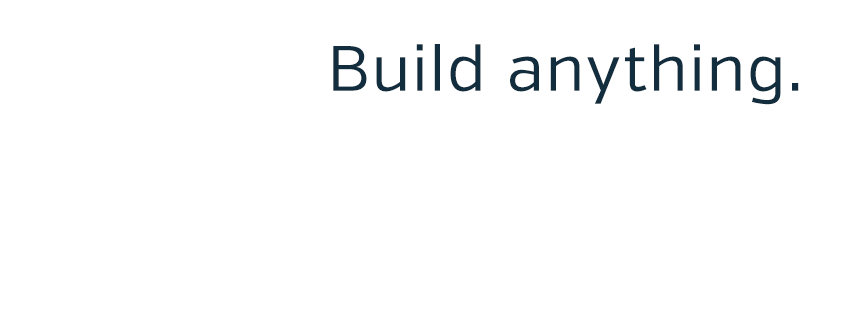
<style>
.page{position:relative;width:851px;height:315px;background:#ffffff}
.page>*{position:absolute;margin:0}
.t1{font:64px "VerbRegular";letter-spacing:0.025em;color:#122d3e}
</style>
<div class="page">
<p class="t1" style="left:333px;top:44px;width:466px;height:61px">Build anything.</p>
</div>
